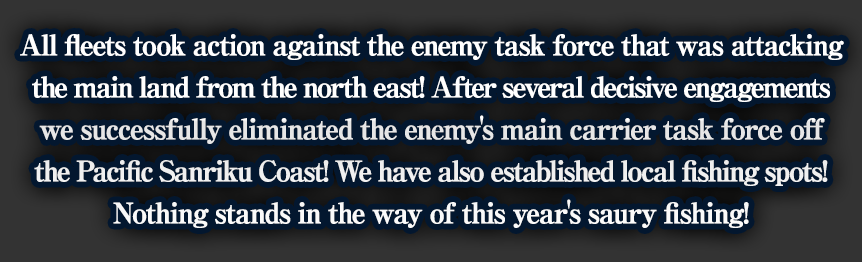
<style>
.page{position:relative;width:862px;height:262px;background:#03172f}
.page>*{position:absolute;margin:0}
.t1{font:28px/42px "RyuminPro-ExBold";letter-spacing:-0.1em;color:#ffffff;font-weight:bold}
.t2{font:28px/42px "RyuminPro-ExBold";letter-spacing:-0.08em;color:#ffffff;font-weight:bold}
</style>
<div class="page">
<p class="t1" style="left:20px;top:34px;width:824px;height:194px;text-align:center"><span class="t2">All fleets took action against the enemy task force that was attacking<br></span>the main land from the north east! After several decisive engagements<br><span class="t2">we successfully eliminated the enemy's main carrier task force off<br></span>the Pacific Sanriku Coast! We have also established local fishing spots!<br><span class="t2">Nothing stands in the way of this year's saury fishing!</span></p>
</div>
